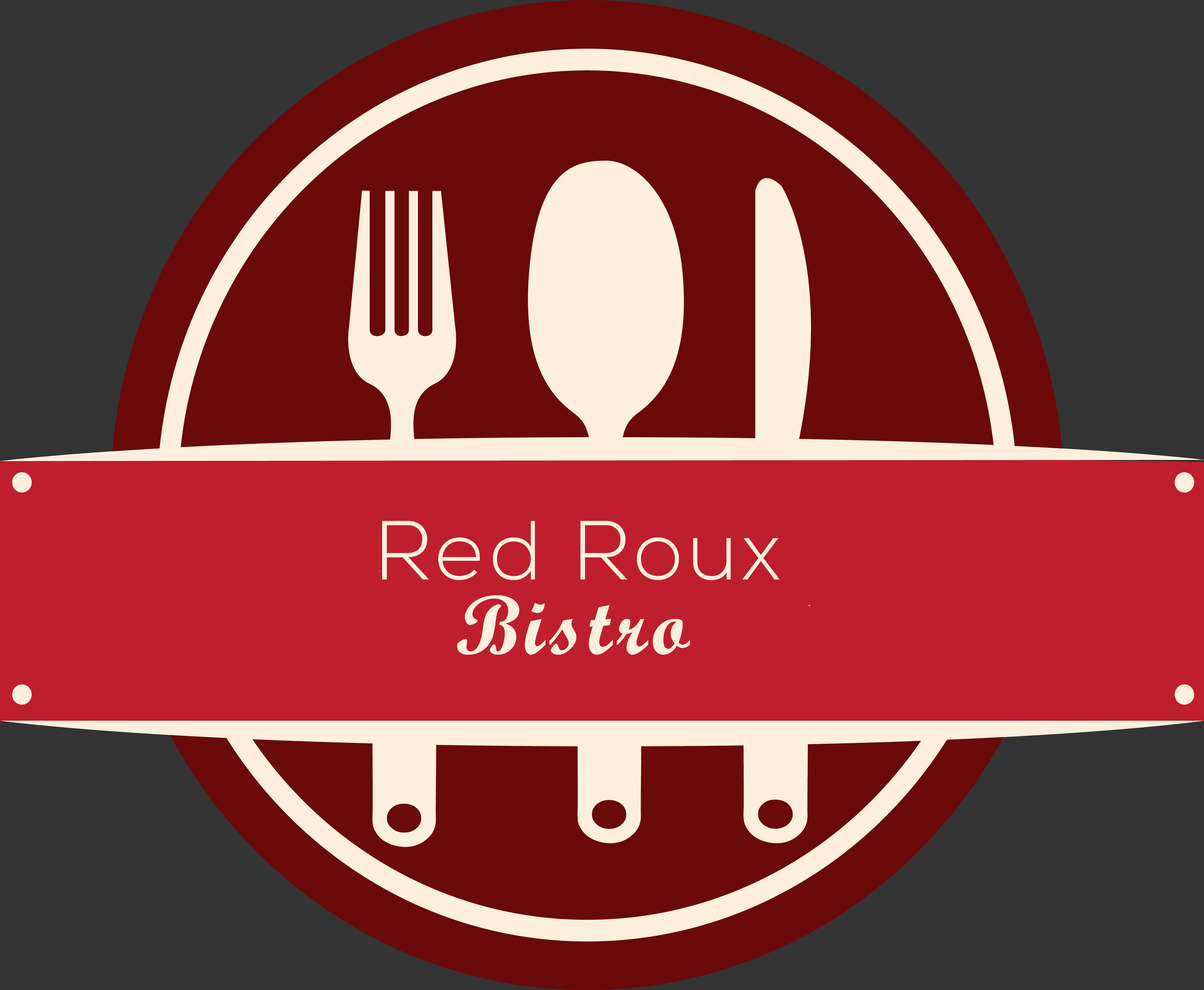
<style>
.page{position:relative;width:1204px;height:990px;background:#333333}
.page>*{position:absolute;margin:0}
.t1{font:83.6px "Nexa-Light";letter-spacing:0.06em;color:#feefdd}
.t2{font:83.6px "ScriptMTBold";letter-spacing:0.06em;color:#feefdd}
</style>
<div class="page">
<p class="t1" style="left:382px;top:521px;width:398px;height:59px">Red Roux</p>
<p class="t2" style="left:457px;top:595px;width:233px;height:60px">Bistro</p>
</div>
